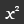
<style>
.page{position:relative;width:24px;height:24px;background:#333333}
.page>*{position:absolute;margin:0}
.t1{font:24px "Gabriola";color:#ffffff}
</style>
<div class="page">
<p class="t1" style="left:5px;top:6px;width:15px;height:13px">x2</p>
</div>
